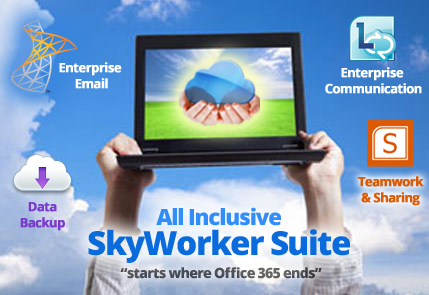
<style>
.page{position:relative;width:429px;height:295px}
.page>*{position:absolute;margin:0}
.t1{font:12.6px/16px "OpenSans-Bold";letter-spacing:-0.05em;color:#ffffff;font-weight:bold}
.t2{font:12.6px/16px "OpenSans-Bold";letter-spacing:-0.05em;color:#dd5a04;font-weight:bold}
.t3{font:12.6px/16px "OpenSans-Bold";letter-spacing:-0.05em;color:#7a3bcd;font-weight:bold}
.t4{font:33.2px/29.9px "OpenSans-Extrabold";letter-spacing:-0.05em;color:#0a6cdc}
.t5{font:22.1px/29.9px "OpenSans-Extrabold";letter-spacing:-0.05em;color:#318ef8}
.t6{font:14px "OpenSans-Extrabold";letter-spacing:-0.05em;color:#4e5158}
</style>
<div class="page">
<p class="t1" style="left:59px;top:62px;width:63px;height:27px;text-align:center">Enterprise <br>Email</p>
<p class="t1" style="left:325px;top:67px;width:97px;height:27px;text-align:center">Enterprise <br>Communication</p>
<p class="t2" style="left:358px;top:176px;width:66px;height:30px;text-align:center">Teamwork<br>&amp; Sharing</p>
<p class="t3" style="left:20px;top:202px;width:45px;height:29px;text-align:center">Data<br>Backup</p>
<p class="t4" style="left:88px;top:207px;width:262px;height:56px;text-align:center"><span class="t5">All Inclusive<br></span>SkyWorker Suite</p>
<p class="t6" style="left:120px;top:267px;width:202px;height:12px">“starts where Office 365 ends”</p>
</div>
